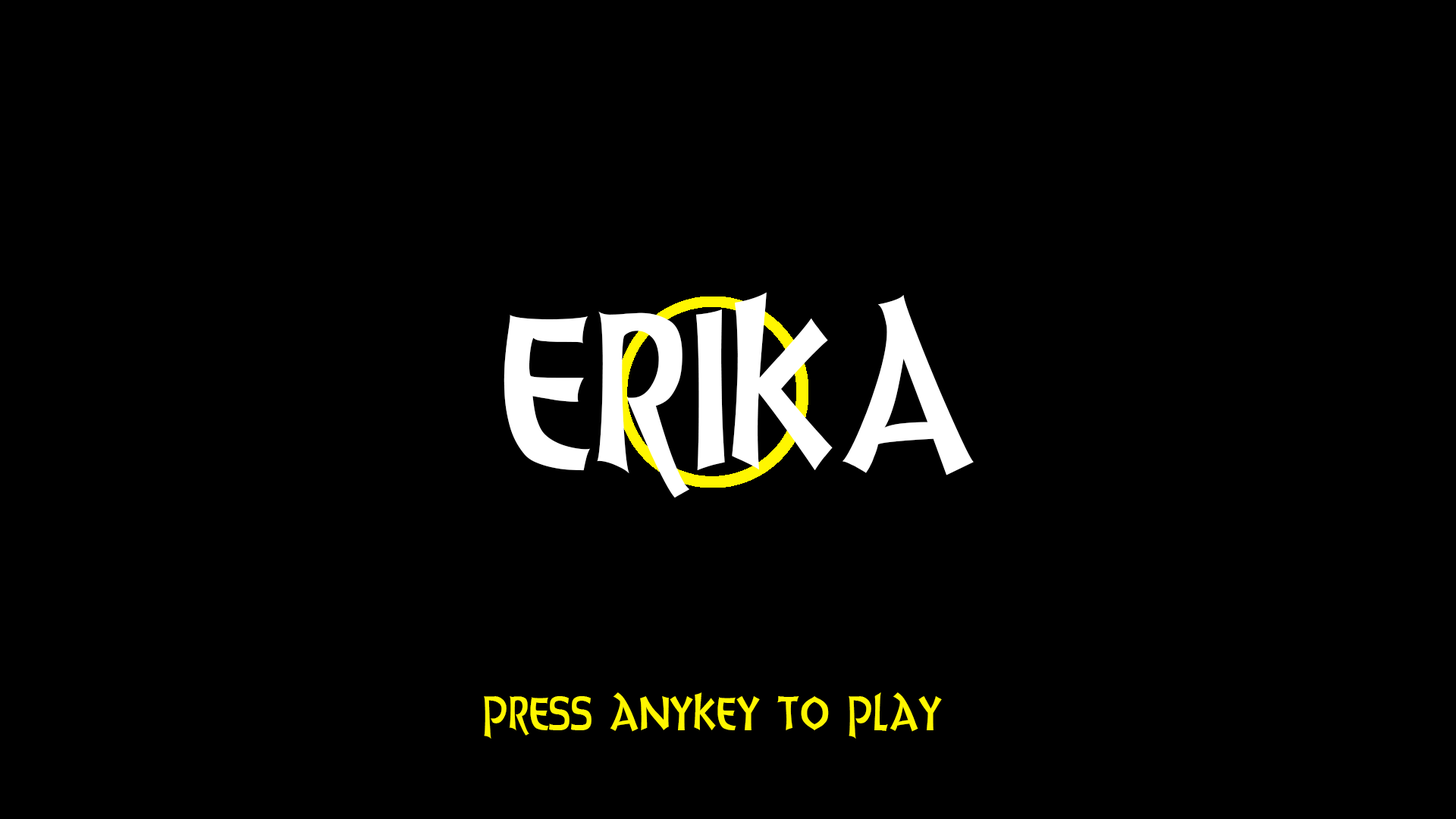
<style>
.page{position:relative;width:1456px;height:819px;background:#000000}
.page>*{position:absolute;margin:0}
.t1{font:227.5px "UnciaDis";color:#ffffff}
.t2{font:56.9px "UnciaDis";color:#fff600}
</style>
<div class="page">
<p class="t1" style="left:504px;top:292px;width:470px;height:206px">ERIKA</p>
<p class="t2" style="left:484px;top:692px;width:458px;height:47px">press anykey to play</p>
</div>
